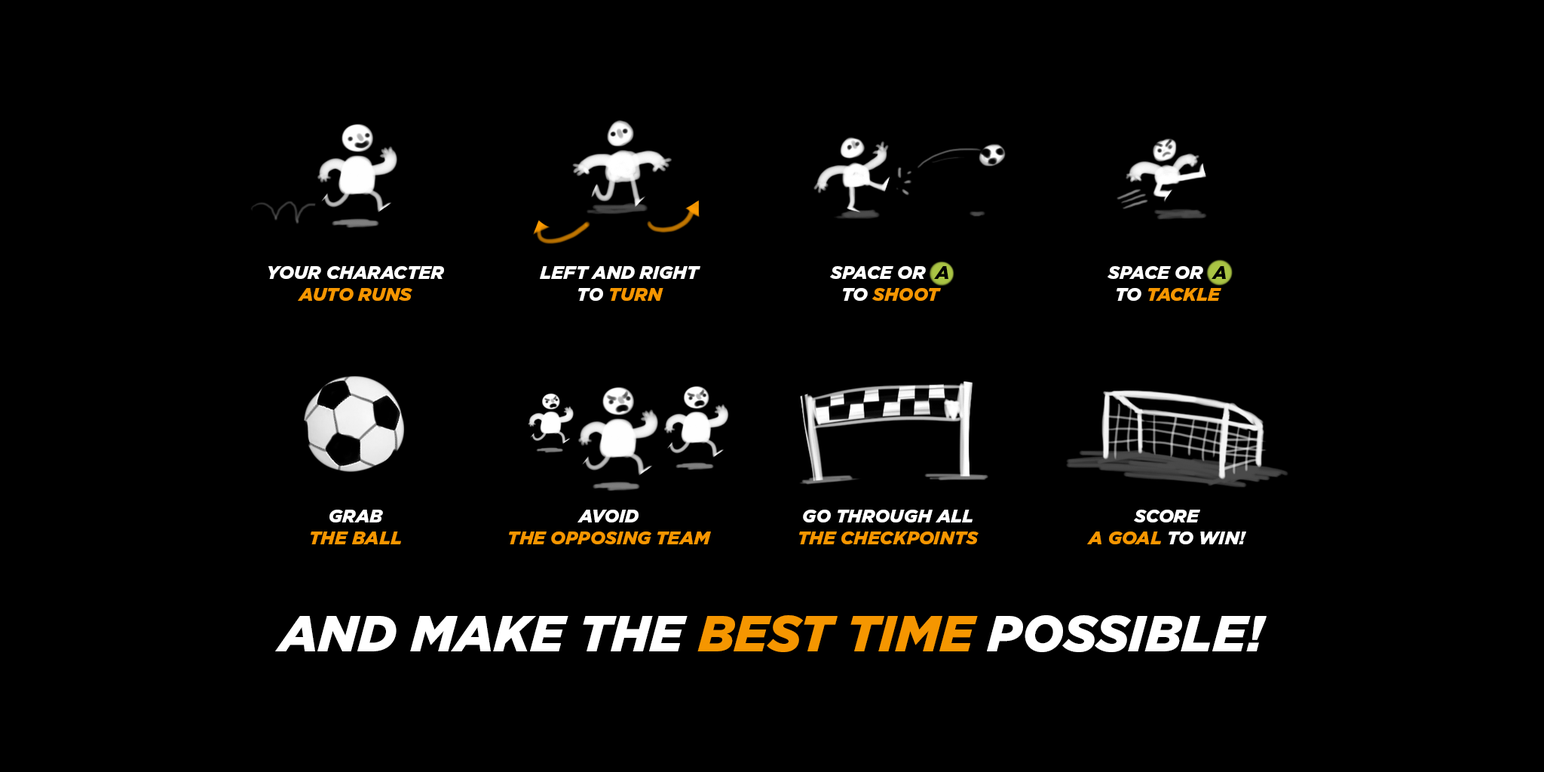
<style>
.page{position:relative;width:1544px;height:772px;background:#000000}
.page>*{position:absolute;margin:0}
.t1{font:18.3px/22.2px "Gotham-BlackItalic";color:#ffffff;text-transform:uppercase}
.t2{font:18.3px/22.2px "Gotham-BlackItalic";color:#f59600;text-transform:uppercase}
.t3{font:18.3px/22.2px "Gotham-BlackItalic";color:#000000;text-transform:uppercase}
.t4{font:50.8px "Gotham-BlackItalic";color:#ffffff;text-transform:uppercase}
.t5{font:50.8px "Gotham-BlackItalic";color:#f59600;text-transform:uppercase}
</style>
<div class="page">
<p class="t1" style="left:268px;top:266px;width:176px;height:35px;text-align:center">Your character<br><span class="t2">Auto runs</span></p>
<p class="t1" style="left:540px;top:266px;width:161px;height:35px;text-align:center">left and right<br>to <span class="t2">turn</span></p>
<p class="t1" style="left:830px;top:266px;width:119px;height:35px;text-align:center">space or  <span class="t3">A<br></span>to <span class="t2">SHOOT</span></p>
<p class="t1" style="left:1108px;top:266px;width:118px;height:35px;text-align:center">space or  <span class="t3">A<br></span>to <span class="t2">tackle</span></p>
<p class="t2" style="left:311px;top:510px;width:90px;height:34px;text-align:center"><span class="t1">Grab<br></span>the ball</p>
<p class="t2" style="left:509px;top:510px;width:202px;height:34px;text-align:center"><span class="t1">Avoid<br></span>the opposing team</p>
<p class="t2" style="left:799px;top:510px;width:180px;height:34px;text-align:center"><span class="t1">go through all<br></span>the checkpoints</p>
<p class="t1" style="left:1087px;top:510px;width:159px;height:34px;text-align:center">Score<br><span class="t2">A goal </span>to win!</p>
<p class="t4" style="left:275px;top:615px;width:992px;height:37px">and make the <span class="t5">best time</span> possible!</p>
</div>
